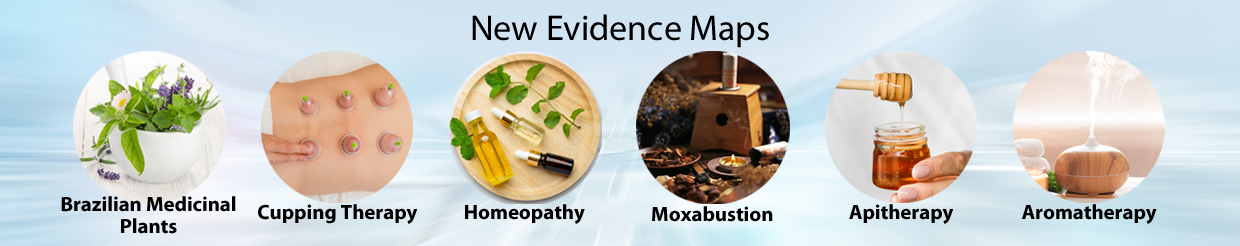
<style>
.page{position:relative;width:1240px;height:246px}
.page>*{position:absolute;margin:0}
.t1{font:36px "MyriadPro-Regular";color:#000000}
.t2{font:20.8px/7.6px "MyriadPro-Bold";color:#000000}
.t3{font:20.8px "MyriadPro-Bold";color:#000000}
</style>
<div class="page">
<p class="t1" style="left:472px;top:14px;width:297px;height:34px">New Evidence Maps​</p>
<p class="t2" style="left:61px;top:196px;width:175px;height:38px;text-align:center">Brazilian Medicinal<br>Plants</p>
<p class="t3" style="left:258px;top:204px;width:160px;height:20px">Cupping Therapy​</p>
<p class="t3" style="left:465px;top:204px;width:120px;height:20px">Homeopathy​</p>
<p class="t3" style="left:652px;top:206px;width:121px;height:16px">Moxabustion</p>
<p class="t3" style="left:849px;top:204px;width:105px;height:20px">Apitherapy</p>
<p class="t3" style="left:1022px;top:204px;width:135px;height:20px">Aromatherapy​</p>
</div>
